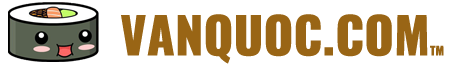
<style>
.page{position:relative;width:450px;height:65px;background:#ffffff}
.page>*{position:absolute;margin:0}
.t1{font:50px "Oswald-Heavy";color:#996515}
.t2{font:12px "Oswald-Heavy";color:#996515}
</style>
<div class="page">
<p class="t1" style="left:121px;top:14px;width:323px;height:50px">VANQUOC.COM<span class="t2">TM</span></p>
</div>
